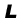
<style>
.page{position:relative;width:22px;height:22px;background:#ffffff}
.page>*{position:absolute;margin:0}
.t1{font:18.9px "Arial-BlackItalic";color:#000000}
</style>
<div class="page">
<p class="t1" style="left:5px;top:4px;width:12px;height:14px">L</p>
</div>
